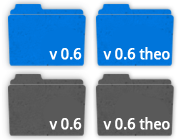
<style>
.page{position:relative;width:180px;height:140px}
.page>*{position:absolute;margin:0}
.t1{font:15px "DroidSans";letter-spacing:-0.025em;color:#ffffff;font-weight:bold}
</style>
<div class="page">
<p class="t1" style="left:49px;top:48px;width:33px;height:12px">v 0.6</p>
<p class="t1" style="left:103px;top:47px;width:67px;height:13px">v 0.6 theo</p>
<p class="t1" style="left:49px;top:118px;width:33px;height:12px">v 0.6</p>
<p class="t1" style="left:103px;top:117px;width:67px;height:13px">v 0.6 theo</p>
</div>
